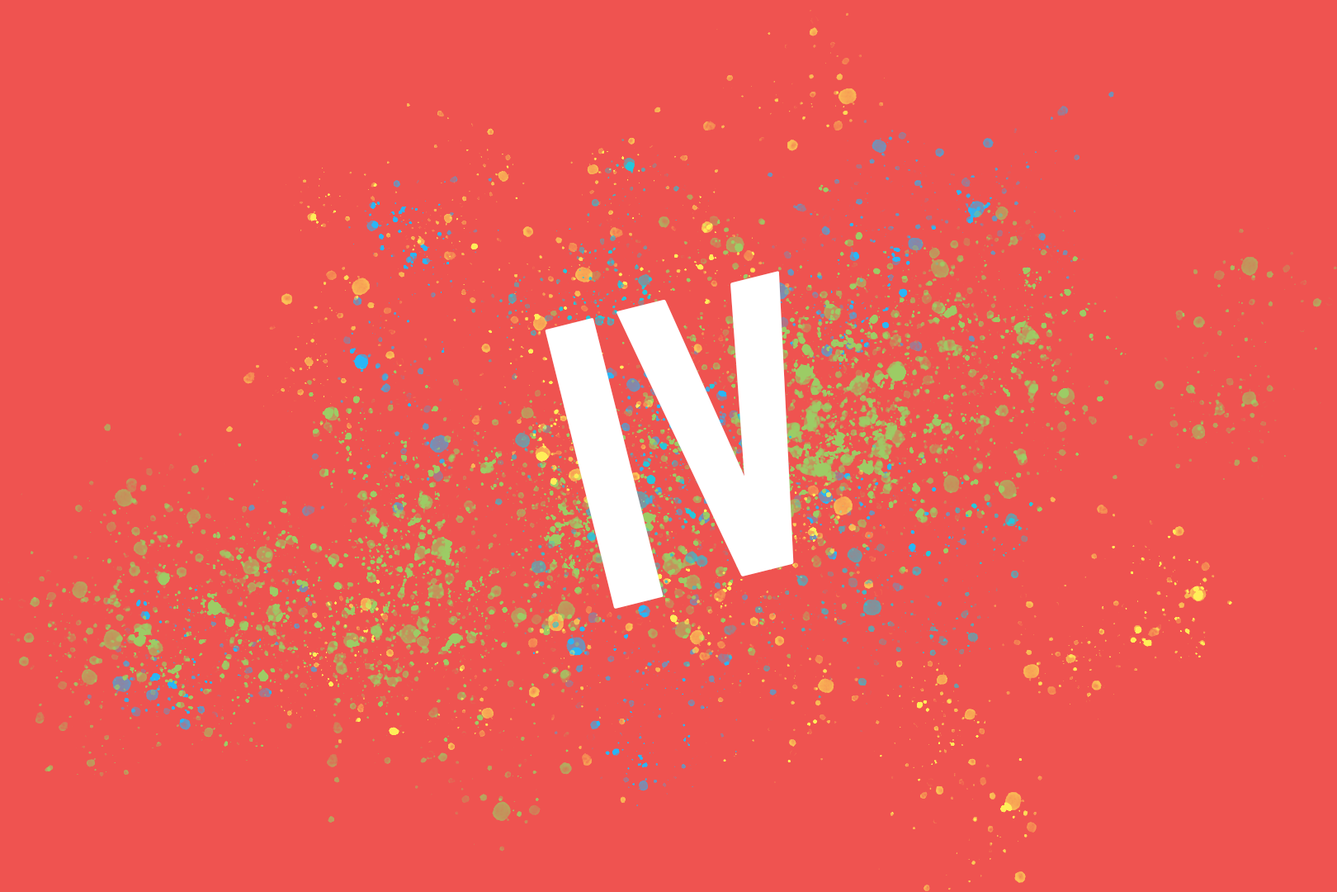
<style>
.page{position:relative;width:1337px;height:892px;background:#ef5350}
.page>*{position:absolute;margin:0}
.t1{font:412.8px "Staatliches-Regular";color:#ffffff}
</style>
<div class="page">
<p class="t1" style="left:545px;top:271px;width:249px;height:337px;rotate:-14deg">IV</p>
</div>
